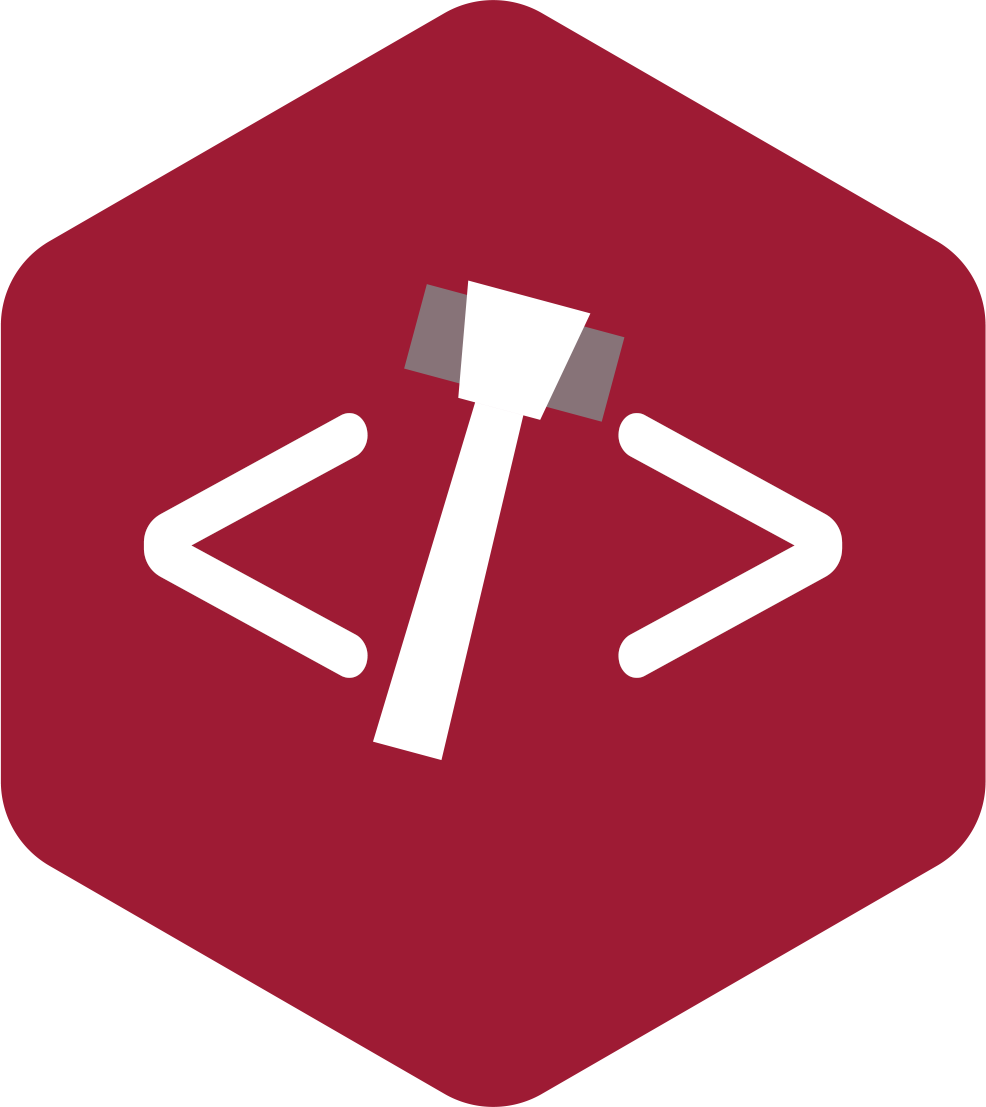
<style>
.page{position:relative;width:986px;height:1107px;background:#9e1b34}
.page>*{position:absolute;margin:0}
.t1{font:555.9px "VarelaRound-Regular";color:#ffffff;scale:0.82 1}
.t2{font:555.9px "VarelaRound-Regular";color:#9e1b34;scale:0.82 1}
</style>
<div class="page">
<p class="t1" style="left:143px;top:285px;width:700px;height:478px">&lt;<span class="t2">/</span>&gt;</p>
</div>
